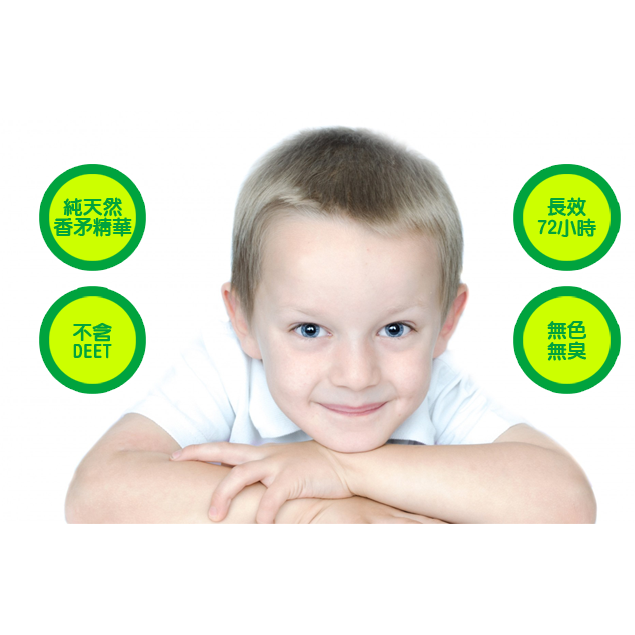
<style>
.page{position:relative;width:635px;height:635px;background:#ffffff}
.page>*{position:absolute;margin:0}
.t1{font:19.7px/20.5px "DFYuan-XB-WIN-BF";color:#00a33d}
</style>
<div class="page">
<p class="t1" style="left:53px;top:197px;width:79px;height:40px;text-align:center">純天然<br>香矛精華</p>
<p class="t1" style="left:537px;top:197px;width:59px;height:40px;text-align:center">長效<br>72小時</p>
<p class="t1" style="left:73px;top:322px;width:39px;height:37px;text-align:center">不含<br>DEET</p>
<p class="t1" style="left:547px;top:321px;width:39px;height:40px;text-align:center">無色<br>無臭</p>
</div>
